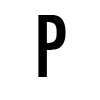
<style>
.page{position:relative;width:100px;height:100px;background:#ffffff}
.page>*{position:absolute;margin:0}
.t1{font:100px "TwCenMT-Condensed";color:#000000}
</style>
<div class="page">
<p class="t1" style="left:38px;top:15px;width:28px;height:62px">P</p>
</div>
